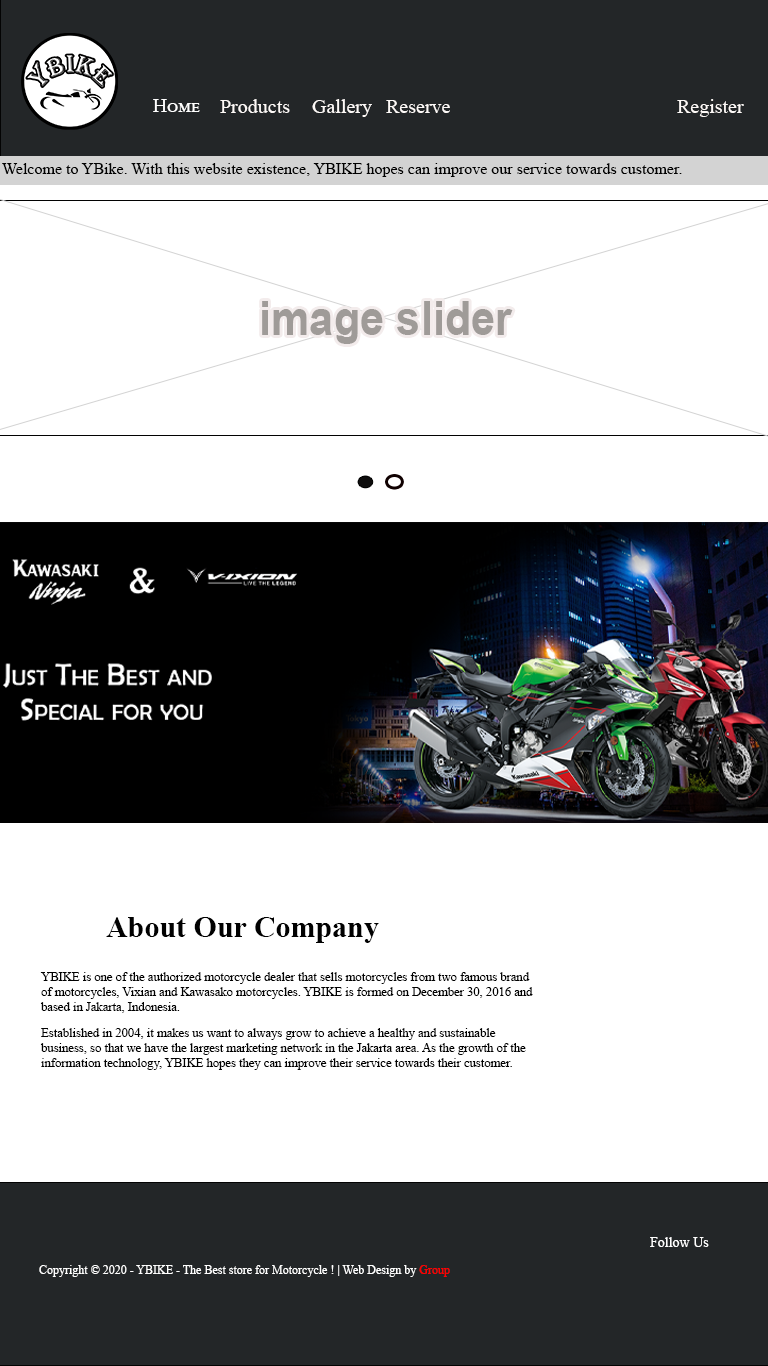
<style>
.page{position:relative;width:768px;height:1366px;background:#ffffff}
.page>*{position:absolute;margin:0}
.t1{font:20px "TimesNewRomanPSMT";color:#ffffff;font-variant:small-caps}
.t2{font:20px "TimesNewRomanPSMT";color:#fdf9f7}
.t3{font:16px "TimesNewRomanPSMT";color:#010101}
.t4{font:46.9px "Arial-BoldMT";color:#9f9b98;scale:0.93 1}
.t5{font:30px "TimesNewRomanPS-BoldMT";color:#010101}
.t6{font:12.6px "TimesNewRomanPSMT";color:#010101}
.t7{font:14px "TimesNewRomanPSMT";color:#ffffff}
.t8{font:12px "TimesNewRomanPSMT";color:#ffffff}
.t9{font:12px "TimesNewRomanPSMT";color:#ff0000}
</style>
<div class="page">
<p class="t1" style="left:153px;top:99px;width:47px;height:13px">Home</p>
<p class="t2" style="left:220px;top:99px;width:70px;height:14px">Products</p>
<p class="t2" style="left:312px;top:99px;width:60px;height:18px">Gallery</p>
<p class="t2" style="left:386px;top:100px;width:64px;height:13px">Reserve</p>
<p class="t2" style="left:677px;top:99px;width:67px;height:18px">Register</p>
<p class="t3" style="left:2px;top:163px;width:680px;height:14px">Welcome to YBike. With this website existence, YBIKE hopes can improve our service towards customer.</p>
<p class="t4" style="left:262px;top:301px;width:251px;height:43px">image slider</p>
<p class="t5" style="left:106px;top:917px;width:273px;height:26px">About Our Company</p>
<p class="t6" style="left:40px;top:972px;width:493px;height:41px">YBIKE is one of the authorized motorcycle dealer that sells motorcycles from two famous brand <br>of motorcycles, Vixian and Kawasako motorcycles. YBIKE is formed on December 30, 2016 and <br>based in Jakarta, Indonesia.</p>
<p class="t6" style="left:40px;top:1028px;width:486px;height:42px">Established in 2004, it makes us want to always grow to achieve a healthy and sustainable <br>business, so that we have the largest marketing network in the Jakarta area. As the growth of the <br>information technology, YBIKE hopes they can improve their service towards their customer.</p>
<p class="t7" style="left:650px;top:1237px;width:59px;height:10px">Follow Us</p>
<p class="t8" style="left:39px;top:1265px;width:411px;height:12px">Copyright © 2020 - YBIKE - The Best store for Motorcycle ! | Web Design by <span class="t9">Group</span></p>
</div>
